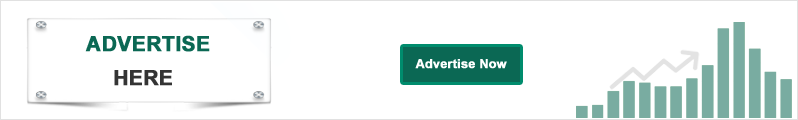
<style>
.page{position:relative;width:798px;height:120px;background:#ffffff}
.page>*{position:absolute;margin:0}
.t1{font:20.8px "Arial-BoldMT";color:#0b6854;font-weight:bold}
.t2{font:12.5px "Arial-BoldMT";color:#ffffff;font-weight:bold}
.t3{font:20.8px "Arial-BoldMT";color:#343434;font-weight:bold}
</style>
<div class="page">
<p class="t1" style="left:85px;top:35px;width:125px;height:17px">ADVERTISE</p>
<p class="t2" style="left:415px;top:59px;width:92px;height:10px">Advertise Now</p>
<p class="t3" style="left:114px;top:70px;width:58px;height:16px">HERE</p>
</div>
